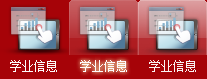
<style>
.page{position:relative;width:207px;height:79px;background:#a60308}
.page>*{position:absolute;margin:0}
.t1{font:12px "NSimSun";color:#fdfafa}
</style>
<div class="page">
<p class="t1" style="left:10px;top:60px;width:47px;height:12px">学业信息</p>
<p class="t1" style="left:80px;top:60px;width:47px;height:12px">学业信息</p>
<p class="t1" style="left:149px;top:60px;width:47px;height:12px">学业信息</p>
</div>
